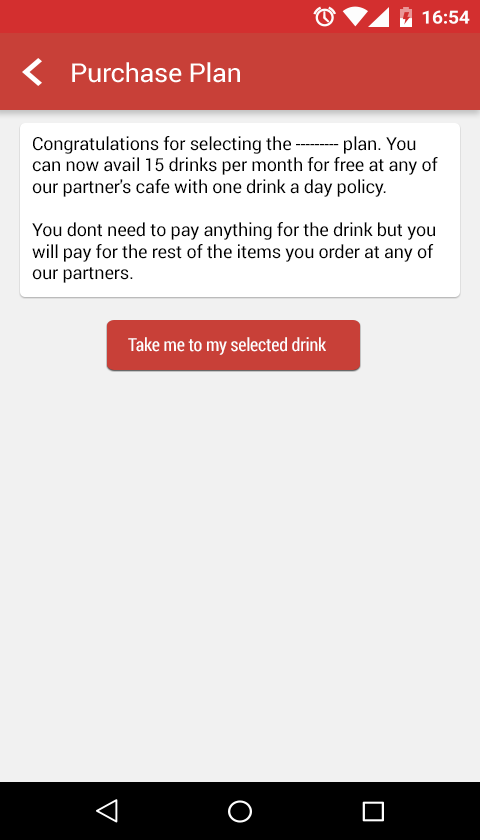
<style>
.page{position:relative;width:480px;height:840px;background:#f1f1f1}
.page>*{position:absolute;margin:0}
.t1{font:26.1px "Roboto-Regular";letter-spacing:-0.01em;color:#ffffff;scale:1.03 1}
.t2{font:18px "Roboto-Regular";letter-spacing:-0.01em;color:#000000}
.t3{font:18px "RobotoCondensed-Regular";letter-spacing:-0.01em;color:#ffffff}
</style>
<div class="page">
<p class="t1" style="left:72px;top:62px;width:168px;height:21px">Purchase Plan</p>
<p class="t2" style="left:32px;top:136px;width:406px;height:147px">Congratulations for selecting the --------- plan. You can now avail 15 drinks per month for free at any of our partner's cafe with one drink a day policy.<br><br>You dont need to pay anything for the drink but you will pay for the rest of the items you order at any of our partners.</p>
<p class="t3" style="left:128px;top:337px;width:198px;height:18px">Take me to my selected drink</p>
</div>
